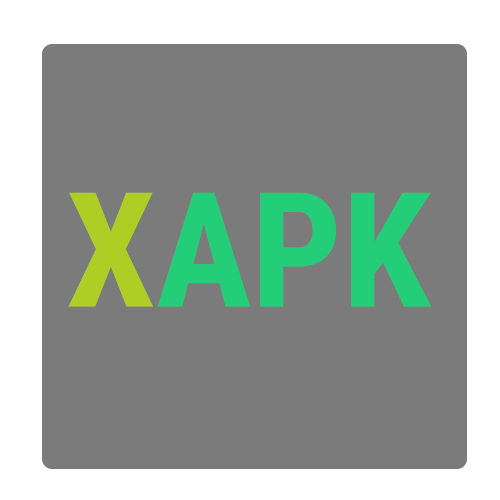
<style>
.page{position:relative;width:500px;height:500px;background:#7b7b7b}
.page>*{position:absolute;margin:0}
.t1{font:160px "RobotoCondensed-Bold";color:#24cd77}
.t2{font:160px "RobotoCondensed-Bold";color:#afcd24}
</style>
<div class="page">
<p class="t1" style="left:68px;top:192px;width:364px;height:115px"><span class="t2">X</span>APK</p>
</div>
